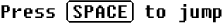
<style>
.page{position:relative;width:223px;height:23px;background:#ffffff}
.page>*{position:absolute;margin:0}
.t1{font:18px "Fixedsys";color:#000000}
</style>
<div class="page">
<p class="t1" style="left:1px;top:4px;width:221px;height:19px">Press SPACE to jump</p>
</div>
